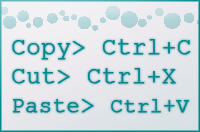
<style>
.page{position:relative;width:200px;height:132px}
.page>*{position:absolute;margin:0}
.t1{font:24px "CourierNewPSMT";color:#01878f;font-weight:bold}
.t2{font:22px "CourierNewPSMT";color:#01878f;font-weight:bold}
.t3{font:21px "CourierNewPSMT";color:#01878f;font-weight:bold}
</style>
<div class="page">
<p class="t1" style="left:12px;top:39px;width:179px;height:74px;text-align:right">Copy&gt; Ctrl+C<br>Cut&gt; Ctrl+X<br><span class="t2">Paste</span>&gt; <span class="t3">Ctrl+V</span></p>
</div>
